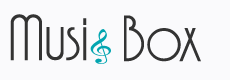
<style>
.page{position:relative;width:230px;height:80px;background:#fafafc}
.page>*{position:absolute;margin:0}
.t1{font:60px "FeenaCasual";color:#333333}
</style>
<div class="page">
<p class="t1" style="left:10px;top:14px;width:77px;height:47px">Musi</p>
<p class="t1" style="left:124px;top:15px;width:77px;height:47px">Box</p>
</div>
